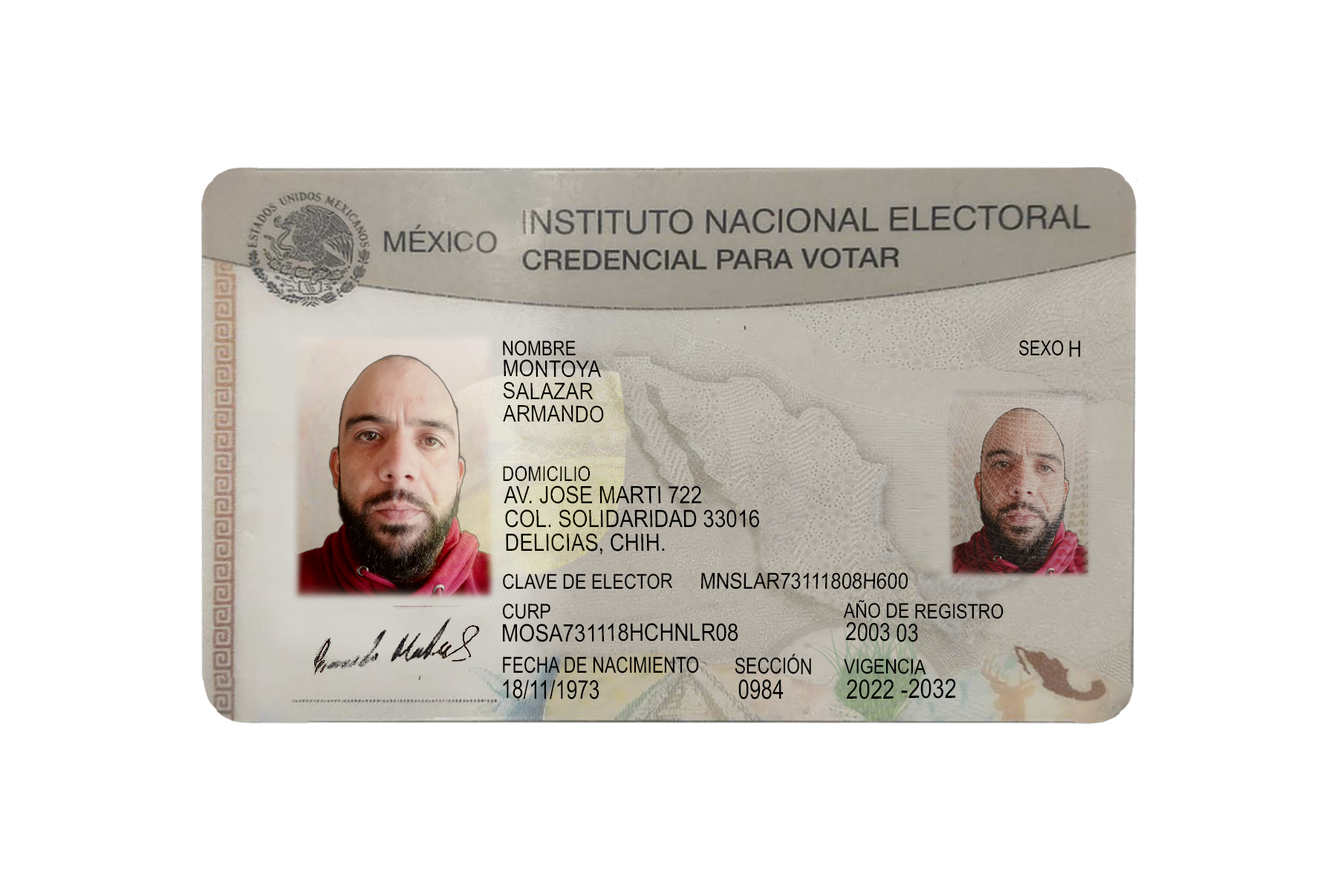
<style>
.page{position:relative;width:1337px;height:892px;background:#ffffff}
.page>*{position:absolute;margin:0}
.t1{font:20.2px "ArialMT";color:#000000;scale:0.84 1}
.t2{font:20.7px "ArialMT";color:#000000;scale:0.79 1}
.t3{font:22.4px "ArialMT";color:#000000;scale:0.84 1}
.t4{font:22.8px/22.5px "ArialMT";color:#000000;scale:0.87 1}
.t5{font:20.5px "ArialMT";color:#000000;scale:0.83 1}
.t6{font:24px/23.7px "ArialMT";color:#000000;scale:0.86 1}
.t7{font:20.4px "ArialMT";color:#000000;scale:0.85 1}
.t8{font:22.1px "ArialMT";color:#000000;scale:0.87 1}
.t9{font:20.2px "ArialMT";color:#000000;scale:0.85 1}
.t10{font:24.1px "ArialMT";color:#000000;scale:0.86 1}
.t11{font:25.1px "ArialMT";color:#000000;scale:0.81 1}
.t12{font:22.2px "ArialMT";color:#000000;scale:0.77 1}
.t13{font:26.1px "ArialMT";color:#000000;scale:0.77 1}
.t14{font:26.9px "ArialMT";color:#000000;scale:0.77 1}
.t15{font:26.7px "ArialMT";color:#000000;scale:0.82 1}
</style>
<div class="page">
<p class="t1" style="left:503px;top:340px;width:73px;height:16px">NOMBRE</p>
<p class="t2" style="left:1019px;top:340px;width:45px;height:16px">SEXO</p>
<p class="t3" style="left:1070px;top:340px;width:11px;height:17px">H</p>
<p class="t4" style="left:503px;top:359px;width:101px;height:64px">MONTOYA<br>SALAZAR<br>ARMANDO</p>
<p class="t5" style="left:503px;top:465px;width:88px;height:16px">DOMICILIO</p>
<p class="t6" style="left:504px;top:485px;width:255px;height:69px">AV. JOSE MARTI 722<br>COL. SOLIDARIDAD 33016<br>DELICIAS, CHIH.</p>
<p class="t7" style="left:503px;top:573px;width:170px;height:16px">CLAVE DE ELECTOR</p>
<p class="t8" style="left:701px;top:572px;width:207px;height:17px">MNSLAR73111808H600</p>
<p class="t7" style="left:502px;top:603px;width:49px;height:16px;rotate:1deg">CURP</p>
<p class="t9" style="left:843px;top:600px;width:161px;height:19px">AÑO DE REGISTRO</p>
<p class="t10" style="left:503px;top:623px;width:236px;height:19px">MOSA731118HCHNLR08</p>
<p class="t11" style="left:846px;top:621px;width:72px;height:21px;rotate:1deg">2003 03</p>
<p class="t12" style="left:735px;top:653px;width:76px;height:22px;rotate:1deg">SECCIÓN</p>
<p class="t12" style="left:503px;top:656px;width:196px;height:17px">FECHA DE NACIMIENTO</p>
<p class="t9" style="left:844px;top:658px;width:83px;height:17px;rotate:1deg">VIGENCIA</p>
<p class="t13" style="left:503px;top:679px;width:97px;height:20px;rotate:1deg">18/11/1973</p>
<p class="t14" style="left:739px;top:679px;width:44px;height:20px;rotate:1deg">0984</p>
<p class="t15" style="left:847px;top:678px;width:109px;height:21px;rotate:-1deg">2022 -2032</p>
</div>
